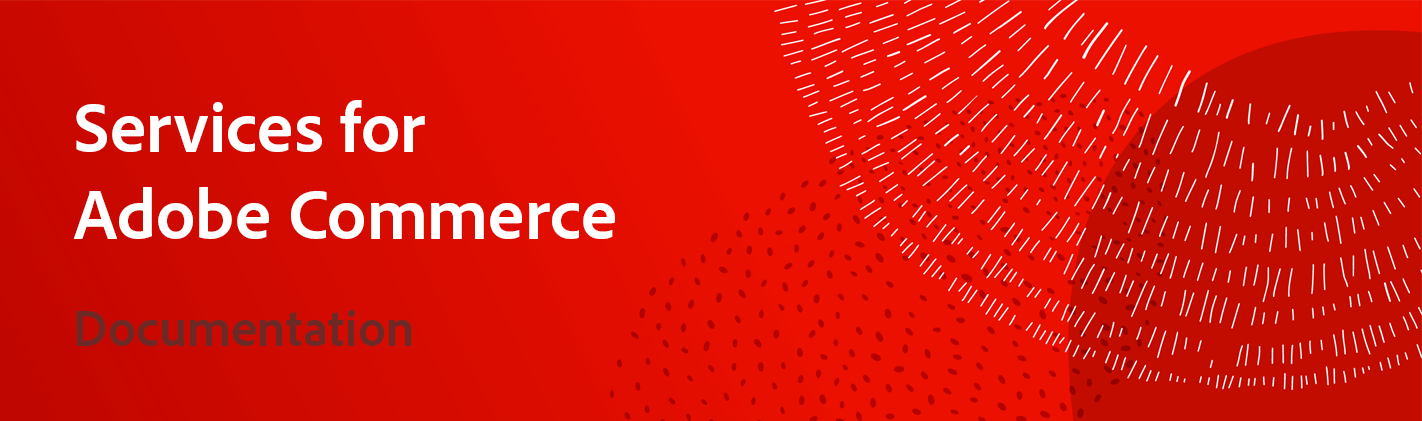
<style>
.page{position:relative;width:1422px;height:421px;background:#eb1000}
.page>*{position:absolute;margin:0}
.t1{font:72px "AdobeClean-Bold";color:#ffffff}
.t2{font:52px "AdobeClean-Bold";color:#6c2925}
</style>
<div class="page">
<p class="t1" style="left:74px;top:100px;width:541px;height:139px">Services for <br>Adobe Commerce</p>
<p class="t2" style="left:76px;top:309px;width:336px;height:37px">Documentation</p>
</div>
